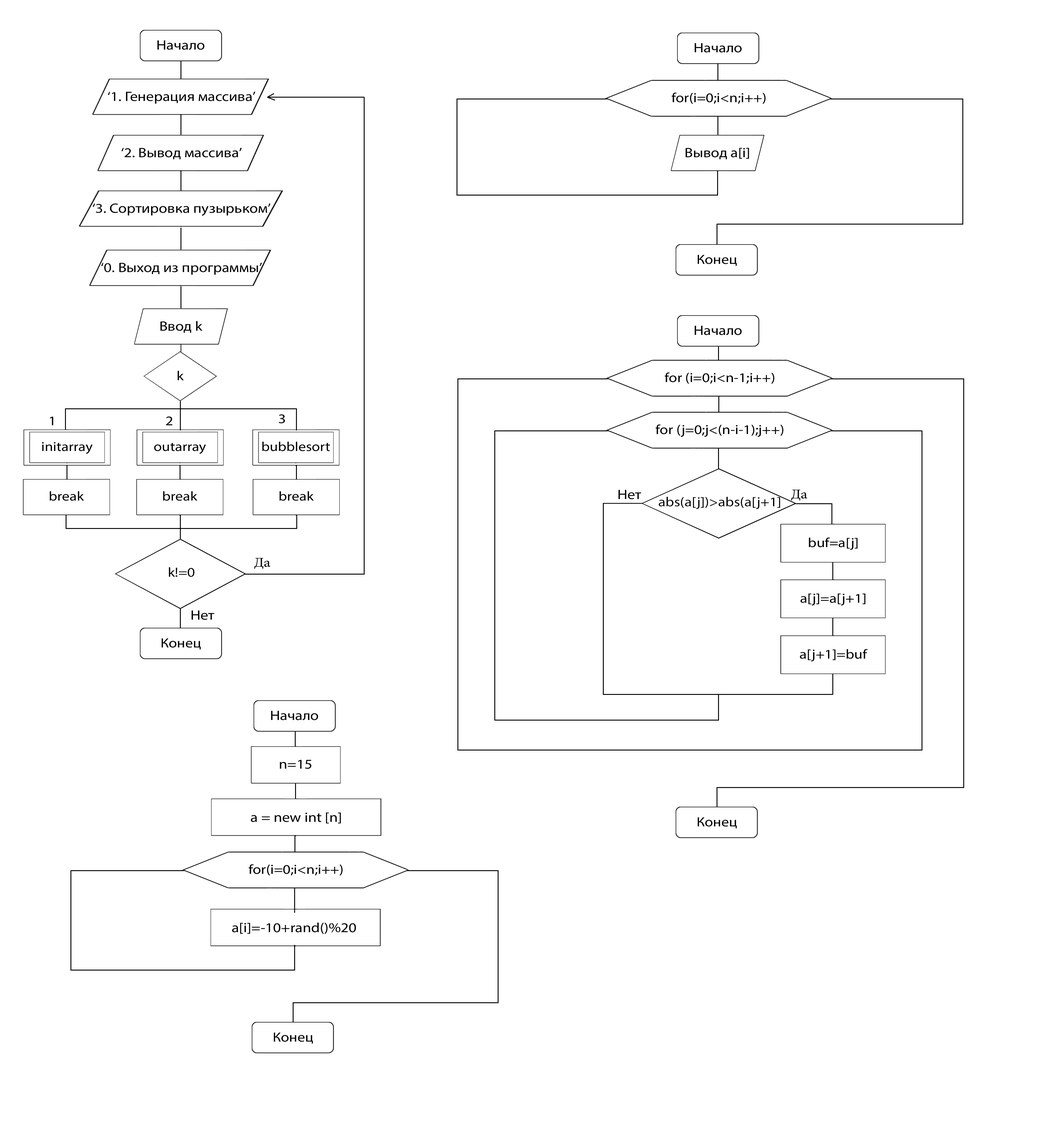
<style>
.page{position:relative;width:1060px;height:1125px;background:#ffffff}
.page>*{position:absolute;margin:0}
.t1{font:13.5px "MyriadPro-Regular";color:#000000;scale:1.14 1}
.t2{font:13.3px "MyriadPro-Regular";color:#000000;scale:1.14 1}
.t3{font:13.1px "MyriadPro-Regular";color:#000000;scale:1.14 1}
.t4{font:13.6px "MyriadPro-Regular";color:#000000;scale:1.13 1}
</style>
<div class="page">
<p class="t1" style="left:157px;top:40px;width:47px;height:10px">Начало</p>
<p class="t1" style="left:694px;top:43px;width:48px;height:10px">Начало</p>
<p class="t1" style="left:108px;top:92px;width:147px;height:12px">‘1. Генерация массива’</p>
<p class="t2" style="left:671px;top:93px;width:94px;height:11px">for(i=0;i&lt;n;i++)</p>
<p class="t1" style="left:121px;top:148px;width:121px;height:11px">‘2. Вывод массива’</p>
<p class="t1" style="left:685px;top:148px;width:64px;height:11px">Вывод a[i]</p>
<p class="t1" style="left:93px;top:203px;width:178px;height:13px">‘3. Сортировка пузырьком’</p>
<p class="t2" style="left:697px;top:255px;width:40px;height:11px">Конец</p>
<p class="t1" style="left:101px;top:263px;width:161px;height:12px">‘0. Выход из программы’</p>
<p class="t1" style="left:160px;top:321px;width:43px;height:12px">Ввод k</p>
<p class="t1" style="left:694px;top:326px;width:48px;height:9px">Начало</p>
<p class="t2" style="left:177px;top:371px;width:7px;height:9px">k</p>
<p class="t2" style="left:664px;top:372px;width:110px;height:12px">for (i=0;i&lt;n-1;i++)</p>
<p class="t2" style="left:50px;top:417px;width:3px;height:8px">1</p>
<p class="t2" style="left:166px;top:417px;width:6px;height:8px">2</p>
<p class="t2" style="left:279px;top:414px;width:6px;height:10px">3</p>
<p class="t2" style="left:655px;top:424px;width:128px;height:13px">for (j=0;j&lt;(n-i-1);j++)</p>
<p class="t3" style="left:42px;top:442px;width:51px;height:12px">initarray</p>
<p class="t3" style="left:154px;top:443px;width:52px;height:11px">outarray</p>
<p class="t3" style="left:262px;top:442px;width:68px;height:9px">bubblesort</p>
<p class="t3" style="left:50px;top:491px;width:34px;height:10px">break</p>
<p class="t3" style="left:163px;top:491px;width:34px;height:10px">break</p>
<p class="t3" style="left:279px;top:491px;width:35px;height:10px">break</p>
<p class="t4" style="left:618px;top:490px;width:23px;height:9px">Нет</p>
<p class="t2" style="left:658px;top:497px;width:122px;height:12px">abs(a[j])&gt;abs(a[j+1]</p>
<p class="t2" style="left:809px;top:537px;width:49px;height:13px">buf=a[j]</p>
<p class="t2" style="left:169px;top:567px;width:25px;height:10px">k!=0</p>
<p class="t2" style="left:800px;top:593px;width:65px;height:13px">a[j]=a[j+1]</p>
<p class="t4" style="left:191px;top:610px;width:23px;height:10px">Нет</p>
<p class="t2" style="left:161px;top:638px;width:40px;height:12px">Конец</p>
<p class="t2" style="left:800px;top:649px;width:68px;height:13px">a[j+1]=buf</p>
<p class="t1" style="left:271px;top:711px;width:47px;height:9px">Начало</p>
<p class="t1" style="left:280px;top:760px;width:31px;height:9px">n=15</p>
<p class="t1" style="left:251px;top:813px;width:90px;height:11px">a = new int [n]</p>
<p class="t2" style="left:697px;top:817px;width:40px;height:12px">Конец</p>
<p class="t2" style="left:248px;top:864px;width:94px;height:12px">for(i=0;i&lt;n;i++)</p>
<p class="t1" style="left:232px;top:923px;width:124px;height:11px">a[i]=-10+rand()%20</p>
<p class="t2" style="left:274px;top:1033px;width:39px;height:11px">Конец</p>
</div>
